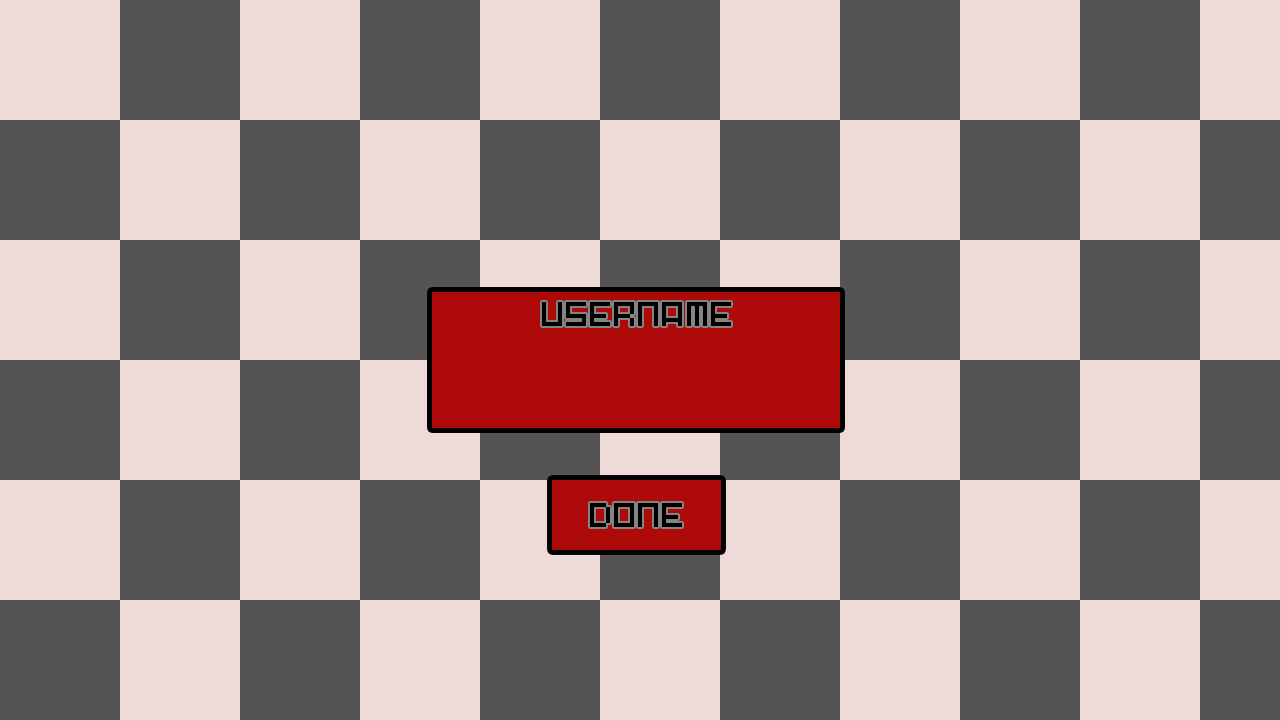
<style>
.page{position:relative;width:1280px;height:720px;background:#efdada}
.page>*{position:absolute;margin:0}
.t1{font:32px "Pixel-Art";color:#000000}
</style>
<div class="page">
<p class="t1" style="left:542px;top:302px;width:189px;height:24px">USERNAME</p>
<p class="t1" style="left:590px;top:503px;width:92px;height:24px">DONE</p>
</div>
